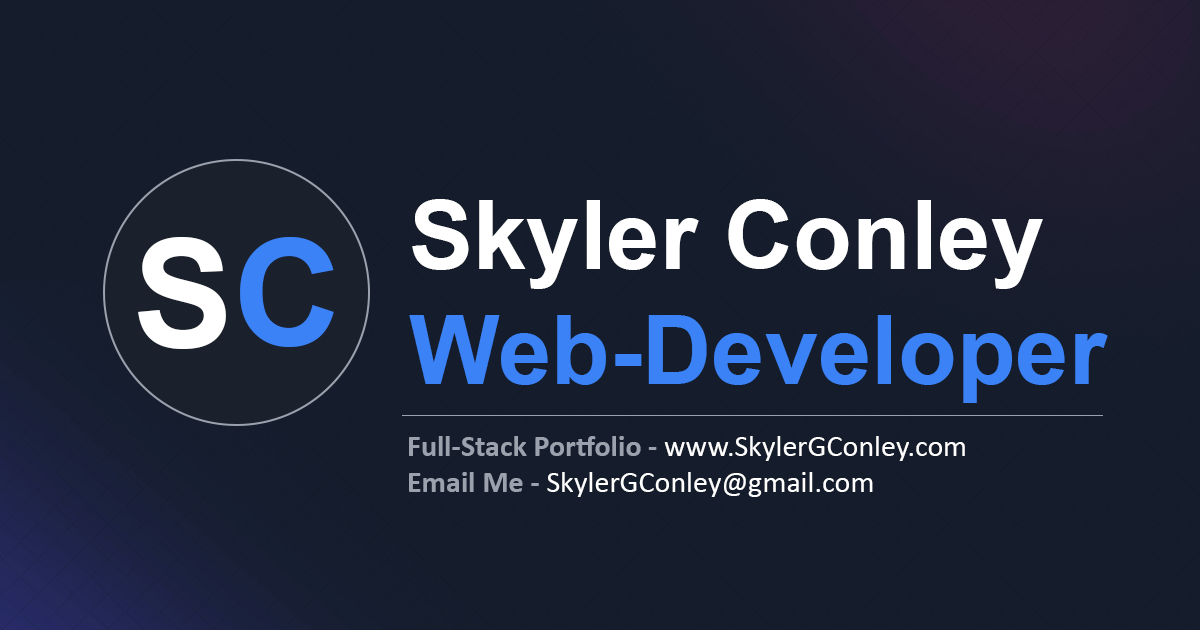
<style>
.page{position:relative;width:1200px;height:630px;background:#151d2c}
.page>*{position:absolute;margin:0}
.t1{font:96px "Arial-BoldMT";color:#ffffff}
.t2{font:96px "Arial-BoldMT";color:#3b82f6}
.t3{font:30px "Calibri";color:#ffffff}
.t4{font:30px "Calibri-Bold";color:#9ba2ae}
</style>
<div class="page">
<p class="t1" style="left:409px;top:199px;width:699px;height:204px">Skyler Conley<span class="t2"> <br>Web-Developer</span></p>
<p class="t3" style="left:409px;top:436px;width:556px;height:61px"><span class="t4">Full-Stack Portfolio - </span>www.SkylerGConley.com<br><span class="t4">Email Me - </span>SkylerGConley@gmail.com</p>
</div>
